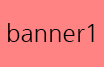
<style>
.page{position:relative;width:104px;height:67px;background:#ff8383}
.page>*{position:absolute;margin:0}
.t1{font:24px "NanumGothic";color:#000000}
</style>
<div class="page">
<p class="t1" style="left:8px;top:23px;width:86px;height:19px">banner1</p>
</div>
